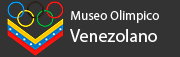
<style>
.page{position:relative;width:180px;height:57px;background:#333333}
.page>*{position:absolute;margin:0}
.t1{font:13px "MyriadPro-Regular";color:#ffffff}
.t2{font:18px "MyriadPro-Regular";color:#ffffff}
</style>
<div class="page">
<p class="t1" style="left:71px;top:10px;width:88px;height:13px">Museo Olimpico</p>
<p class="t2" style="left:70px;top:29px;width:87px;height:13px">Venezolano</p>
</div>
